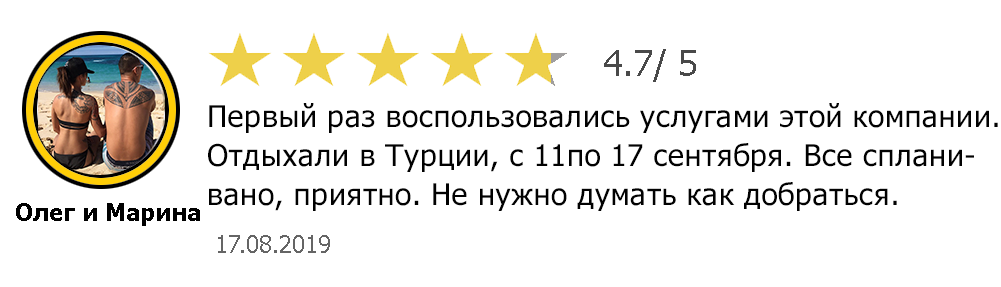
<style>
.page{position:relative;width:1001px;height:287px;background:#ffffff}
.page>*{position:absolute;margin:0}
.t1{font:36px "Tahoma";color:#494949}
.t2{font:30px/19.5px "Tahoma";letter-spacing:0.02em;color:#010101}
.t3{font:24px "Tahoma-Bold";color:#000000}
.t4{font:24px "Tahoma";color:#656565}
</style>
<div class="page">
<p class="t1" style="left:604px;top:49px;width:92px;height:33px">4.7/ 5</p>
<p class="t2" style="left:208px;top:103px;width:790px;height:108px">Первый раз воспользовались услугами этой компании.<br><br>Отдыхали в Турции, с 11по 17 сентября. Все сплани-<br><br>вано, приятно. Не нужно думать как добраться.</p>
<p class="t3" style="left:16px;top:203px;width:184px;height:23px">Олег и Марина</p>
<p class="t4" style="left:218px;top:235px;width:112px;height:18px">17.08.2019</p>
</div>
